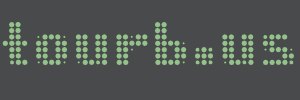
<style>
.page{position:relative;width:300px;height:100px;background:#484a4c}
.page>*{position:absolute;margin:0}
.t1{font:56px "PROGBOT";color:#94c28a}
</style>
<div class="page">
<p class="t1" style="left:2px;top:22px;width:292px;height:43px">tourb.us</p>
</div>
